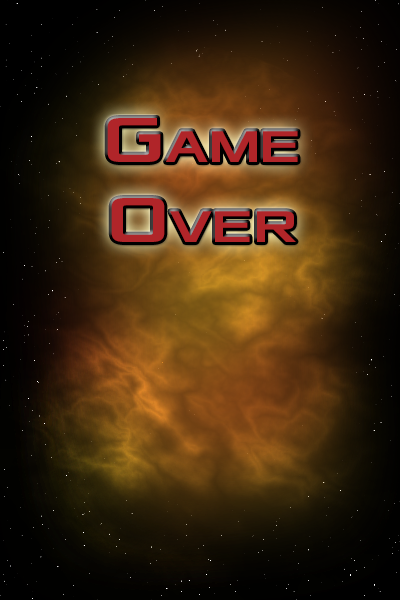
<style>
.page{position:relative;width:400px;height:600px}
.page>*{position:absolute;margin:0}
.t1{font:66.7px "Xolonium-Bold";color:#b02529;font-variant:small-caps}
</style>
<div class="page">
<p class="t1" style="left:107px;top:118px;width:191px;height:124px;text-align:center">Game<br>Over</p>
</div>
